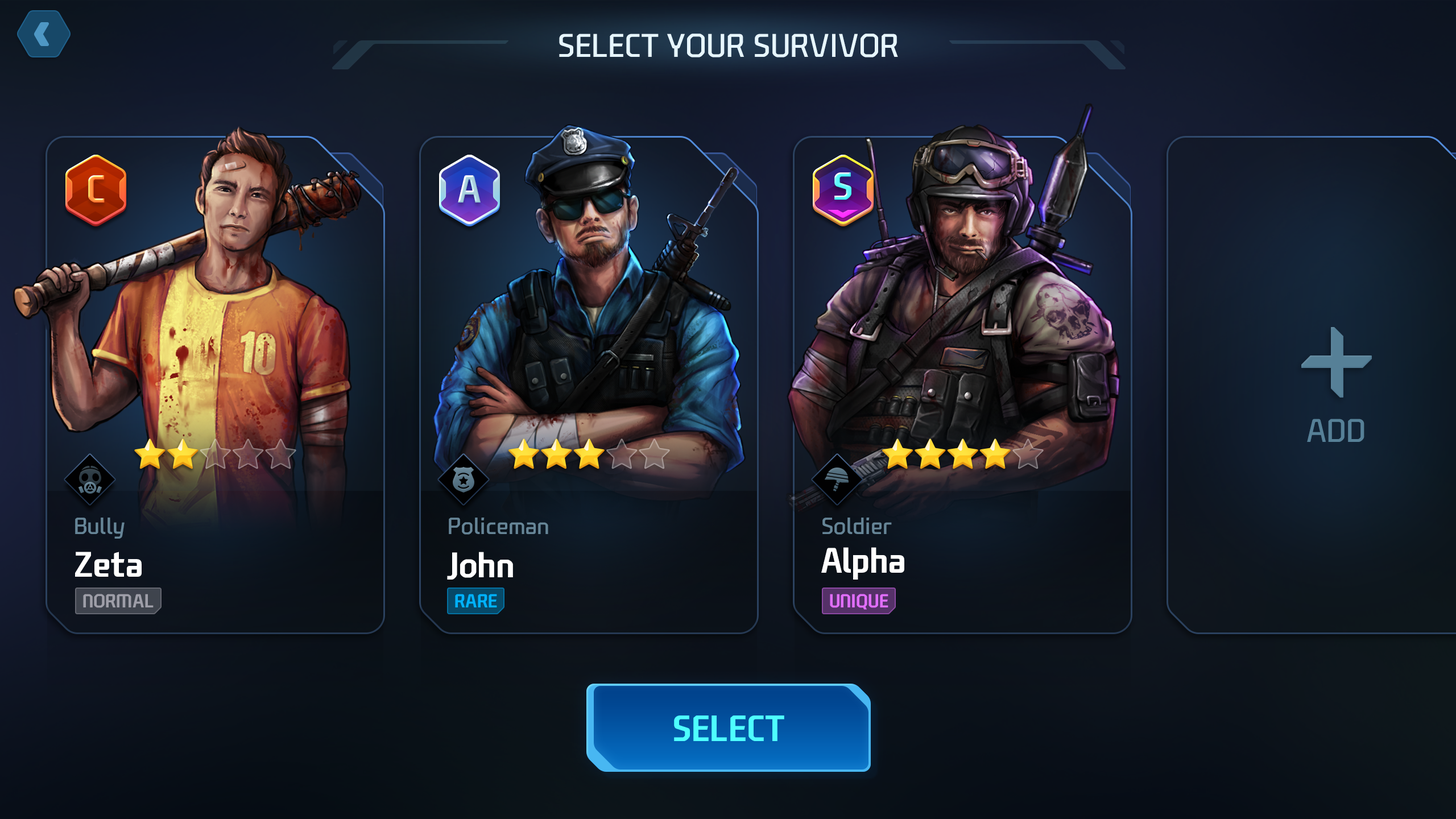
<style>
.page{position:relative;width:1456px;height:819px}
.page>*{position:absolute;margin:0}
.t1{font:31.8px "NEXONFootballGothicL";color:#e6f6ff;text-transform:uppercase}
.t2{font:31.8px "NEXONFootballGothicL";color:#568097;text-transform:uppercase}
.t3{font:22.7px "NEXONFootballGothicL";color:#668597}
.t4{font:34.1px "NEXONFootballGothicB";color:#ffffff}
.t5{font:18.2px "NEXONFootballGothicB";color:#9e9ea8;text-transform:uppercase}
.t6{font:18.2px "NEXONFootballGothicB";color:#00b2ff;text-transform:uppercase}
.t7{font:18.2px "NEXONFootballGothicB";color:#e16efd;text-transform:uppercase}
.t8{font:35.3px "NEXONFootballGothicB";color:#4efefe;text-transform:uppercase}
</style>
<div class="page">
<p class="t1" style="left:559px;top:34px;width:339px;height:23px">Select your Survivor</p>
<p class="t2" style="left:1307px;top:419px;width:57px;height:23px">Add</p>
<p class="t3" style="left:75px;top:518px;width:50px;height:21px">Bully</p>
<p class="t3" style="left:449px;top:518px;width:99px;height:17px">Policeman</p>
<p class="t3" style="left:822px;top:518px;width:70px;height:17px">Soldier</p>
<p class="t4" style="left:75px;top:552px;width:67px;height:25px">Zeta</p>
<p class="t4" style="left:447px;top:552px;width:66px;height:28px">John</p>
<p class="t4" style="left:821px;top:547px;width:83px;height:33px">Alpha</p>
<p class="t5" style="left:83px;top:594px;width:71px;height:14px">NORMAL</p>
<p class="t6" style="left:455px;top:594px;width:42px;height:13px">Rare</p>
<p class="t7" style="left:830px;top:594px;width:58px;height:16px">Unique</p>
<p class="t8" style="left:674px;top:715px;width:110px;height:26px">Select</p>
</div>
